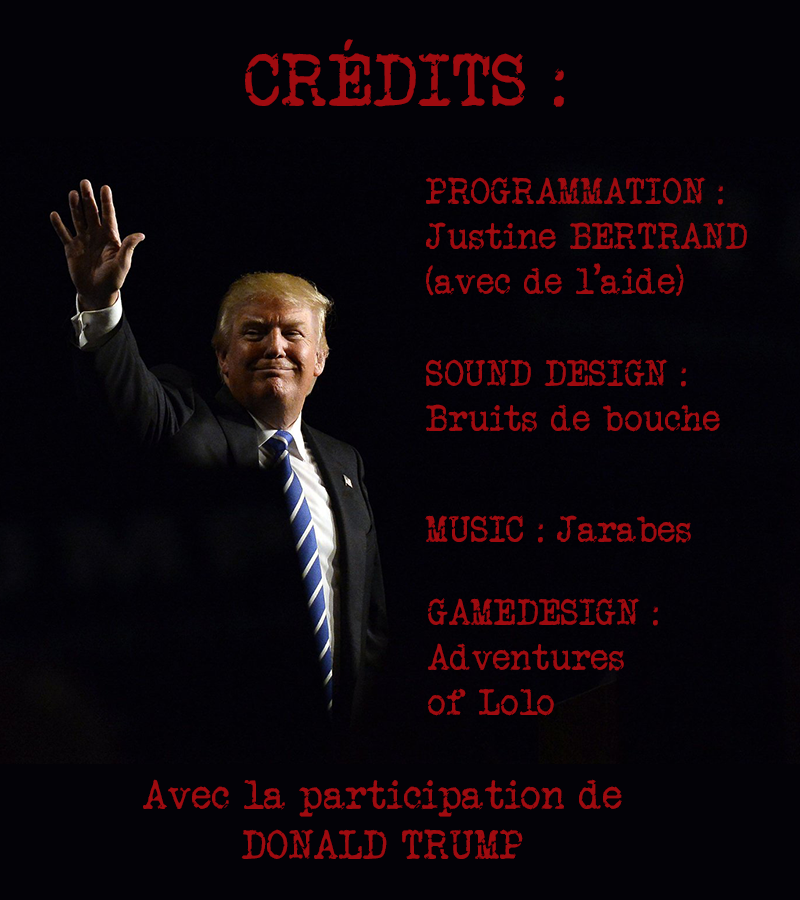
<style>
.page{position:relative;width:800px;height:900px;background:#030207}
.page>*{position:absolute;margin:0}
.t1{font:75px "VeteranTypewriter";color:#9e0b0f}
.t2{font:37.5px "VeteranTypewriter";color:#9e0b0f}
.t3{font:41.7px "VeteranTypewriter";color:#9e0b0f}
</style>
<div class="page">
<p class="t1" style="left:245px;top:39px;width:320px;height:68px">CRÉDITS :</p>
<p class="t2" style="left:426px;top:177px;width:321px;height:119px">PROGRAMMATION : Justine BERTRAND (avec de l’aide)</p>
<p class="t2" style="left:426px;top:359px;width:294px;height:73px">SOUND DESIGN : Bruits de bouche</p>
<p class="t2" style="left:425px;top:515px;width:266px;height:28px">MUSIC : Jarabes</p>
<p class="t2" style="left:428px;top:598px;width:230px;height:118px">GAMEDESIGN : Adventures <br>of Lolo</p>
<p class="t3" style="left:143px;top:779px;width:479px;height:80px;text-align:center">Avec la participation de DONALD TRUMP</p>
</div>
